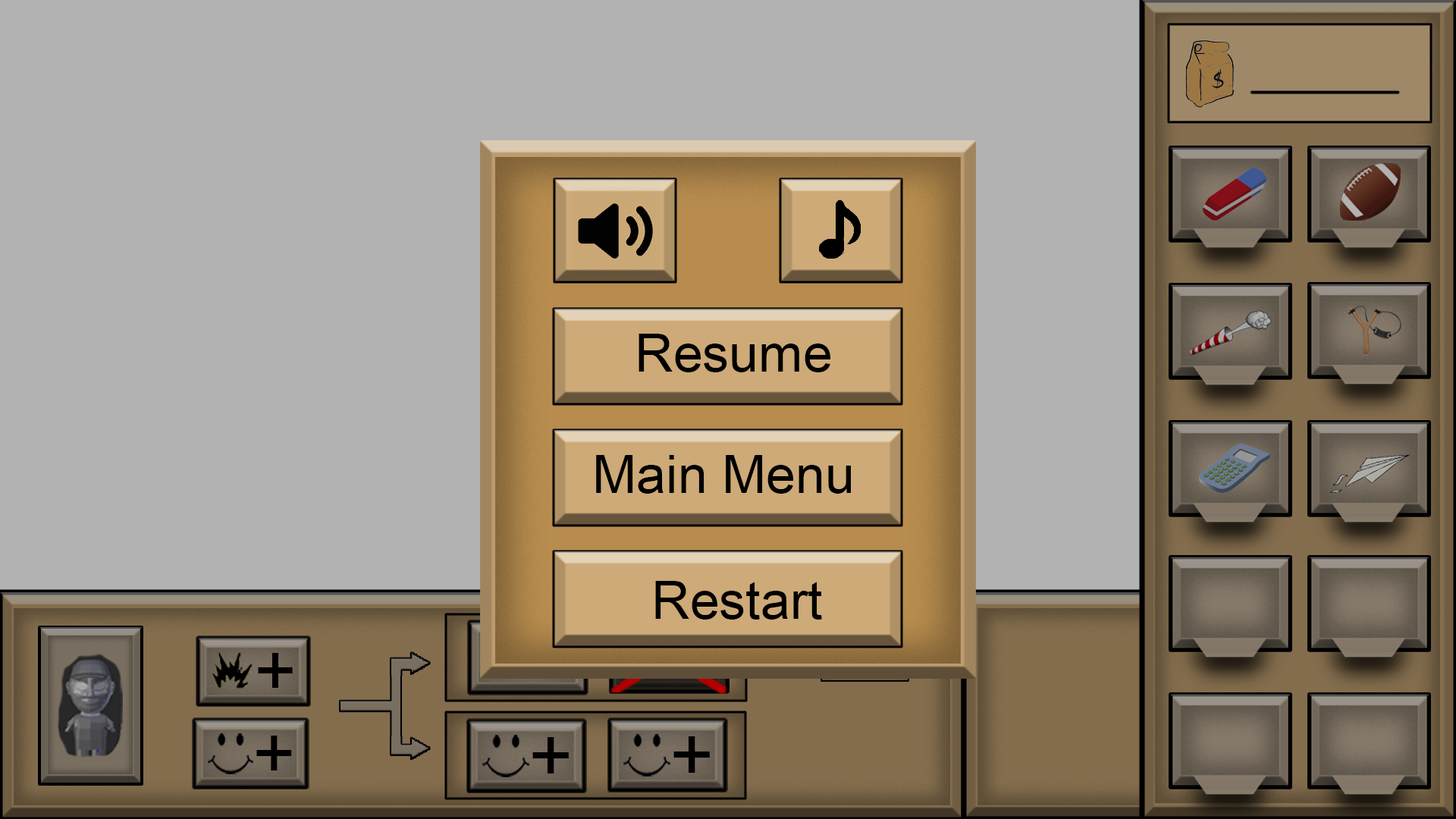
<style>
.page{position:relative;width:1456px;height:819px;background:#b2b2b2}
.page>*{position:absolute;margin:0}
.t1{font:53.1px "ArialMT";color:#000000}
.t2{font:72.9px "ArialMT";color:#000000}
.t3{font:73.6px "ArialMT";color:#000000}
.t4{font:76.1px "ArialMT";color:#000000}
</style>
<div class="page">
<p class="t1" style="left:639px;top:334px;width:191px;height:38px">Resume</p>
<p class="t1" style="left:596px;top:455px;width:255px;height:39px">Main Menu</p>
<p class="t1" style="left:655px;top:581px;width:167px;height:39px">Restart</p>
<p class="t2" style="left:258px;top:653px;width:35px;height:35px">+</p>
<p class="t3" style="left:256px;top:736px;width:36px;height:34px">+</p>
<p class="t4" style="left:532px;top:737px;width:37px;height:36px">+</p>
<p class="t4" style="left:673px;top:736px;width:37px;height:37px">+</p>
</div>
